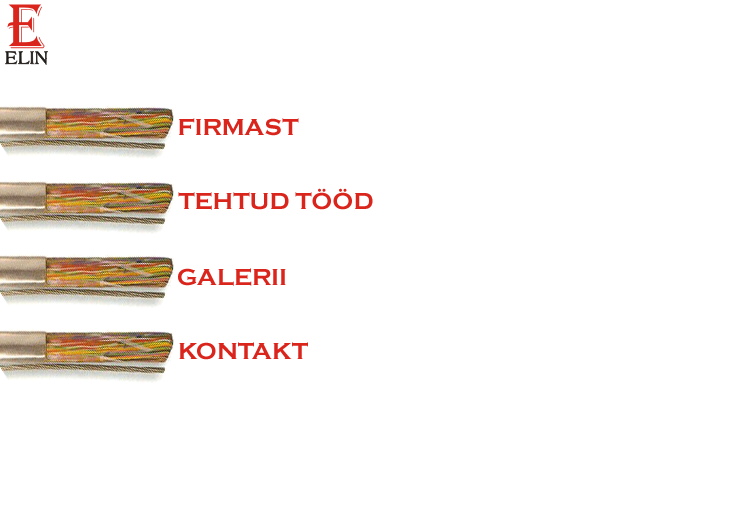
<style>
.page{position:relative;width:755px;height:507px;background:#ffffff}
.page>*{position:absolute;margin:0}
.t1{font:24px "CopperplateGothic-Bold";color:#da251d;text-transform:uppercase}
</style>
<div class="page">
<p class="t1" style="left:179px;top:118px;width:120px;height:18px">Firmast</p>
<p class="t1" style="left:178px;top:188px;width:195px;height:22px">Tehtud tööd</p>
<p class="t1" style="left:178px;top:268px;width:108px;height:18px">Galerii</p>
<p class="t1" style="left:179px;top:342px;width:129px;height:18px">kontakt</p>
</div>
